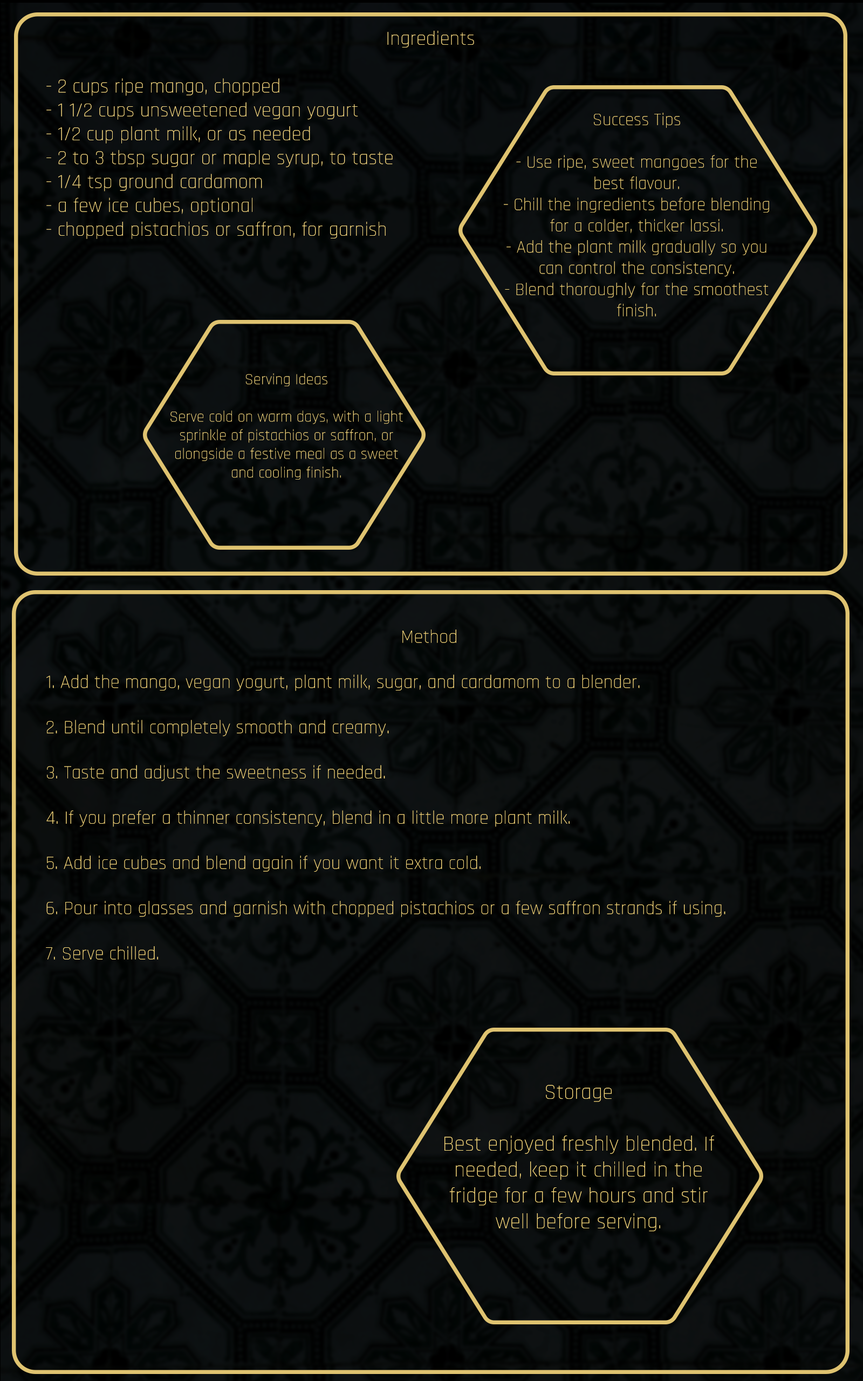
<style>
.page{position:relative;width:863px;height:1381px}
.page>*{position:absolute;margin:0}
.t1{font:19.9px "Rajdhani-Light";color:#ffe085}
.t2{font:17.7px "Rajdhani-Light";color:#ffde7d}
.t3{font:15.5px "Rajdhani-Light";color:#ffe083}
.t4{font:18.9px "Rajdhani-Light";color:#ffdf7f}
.t5{font:21.6px "Rajdhani-Light";color:#ffdf7f}
</style>
<div class="page">
<p class="t1" style="left:46px;top:31px;width:428px;height:208px;text-align:center">Ingredients<br><br>- 2 cups ripe mango, chopped<br>- 1 1/2 cups unsweetened vegan yogurt<br>- 1/2 cup plant milk, or as needed<br>- 2 to 3 tbsp sugar or maple syrup, to taste<br>- 1/4 tsp ground cardamom<br>- a few ice cubes, optional<br>- chopped pistachios or saffron, for garnish</p>
<p class="t2" style="left:504px;top:113px;width:265px;height:204px;text-align:center">Success Tips<br><br>- Use ripe, sweet mangoes for the best flavour.<br>- Chill the ingredients before blending for a colder, thicker lassi.<br>- Add the plant milk gradually so you can control the consistency.<br>- Blend thoroughly for the smoothest finish.</p>
<p class="t3" style="left:170px;top:373px;width:233px;height:107px;text-align:center">Serving Ideas<br><br>Serve cold on warm days, with a light sprinkle of pistachios or saffron, or alongside a festive meal as a sweet and cooling finish.</p>
<p class="t4" style="left:46px;top:630px;width:680px;height:330px;text-align:center">Method<br><br>1. Add the mango, vegan yogurt, plant milk, sugar, and cardamom to a blender.<br><br>2. Blend until completely smooth and creamy.<br><br>3. Taste and adjust the sweetness if needed.<br><br>4. If you prefer a thinner consistency, blend in a little more plant milk.<br><br>5. Add ice cubes and blend again if you want it extra cold.<br><br>6. Pour into glasses and garnish with chopped pistachios or a few saffron strands if using.<br><br>7. Serve chilled.</p>
<p class="t5" style="left:445px;top:1085px;width:269px;height:147px;text-align:center">Storage<br><br>Best enjoyed freshly blended. If needed, keep it chilled in the fridge for a few hours and stir well before serving.</p>
</div>
